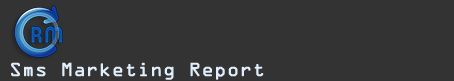
<style>
.page{position:relative;width:454px;height:81px;background:#333333}
.page>*{position:absolute;margin:0}
.t1{font:17.1px "OCRAStd";color:#e1effc;font-weight:bold}
</style>
<div class="page">
<p class="t1" style="left:11px;top:62px;width:253px;height:18px">Sms Marketing Report</p>
</div>
